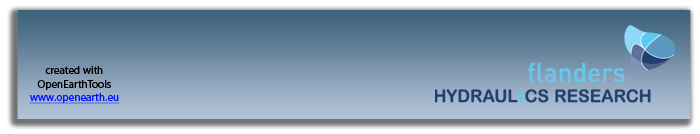
<style>
.page{position:relative;width:700px;height:134px}
.page>*{position:absolute;margin:0}
.t1{font:11.1px "MyriadPro-Regular";color:#000000}
.t2{font:11.1px "MyriadPro-Regular";color:#0012ff;text-decoration:underline}
</style>
<div class="page">
<p class="t1" style="left:29px;top:66px;width:91px;height:38px;text-align:center">created with<br>OpenEarthTools<br><span class="t2">www.openearth.eu</span></p>
</div>
